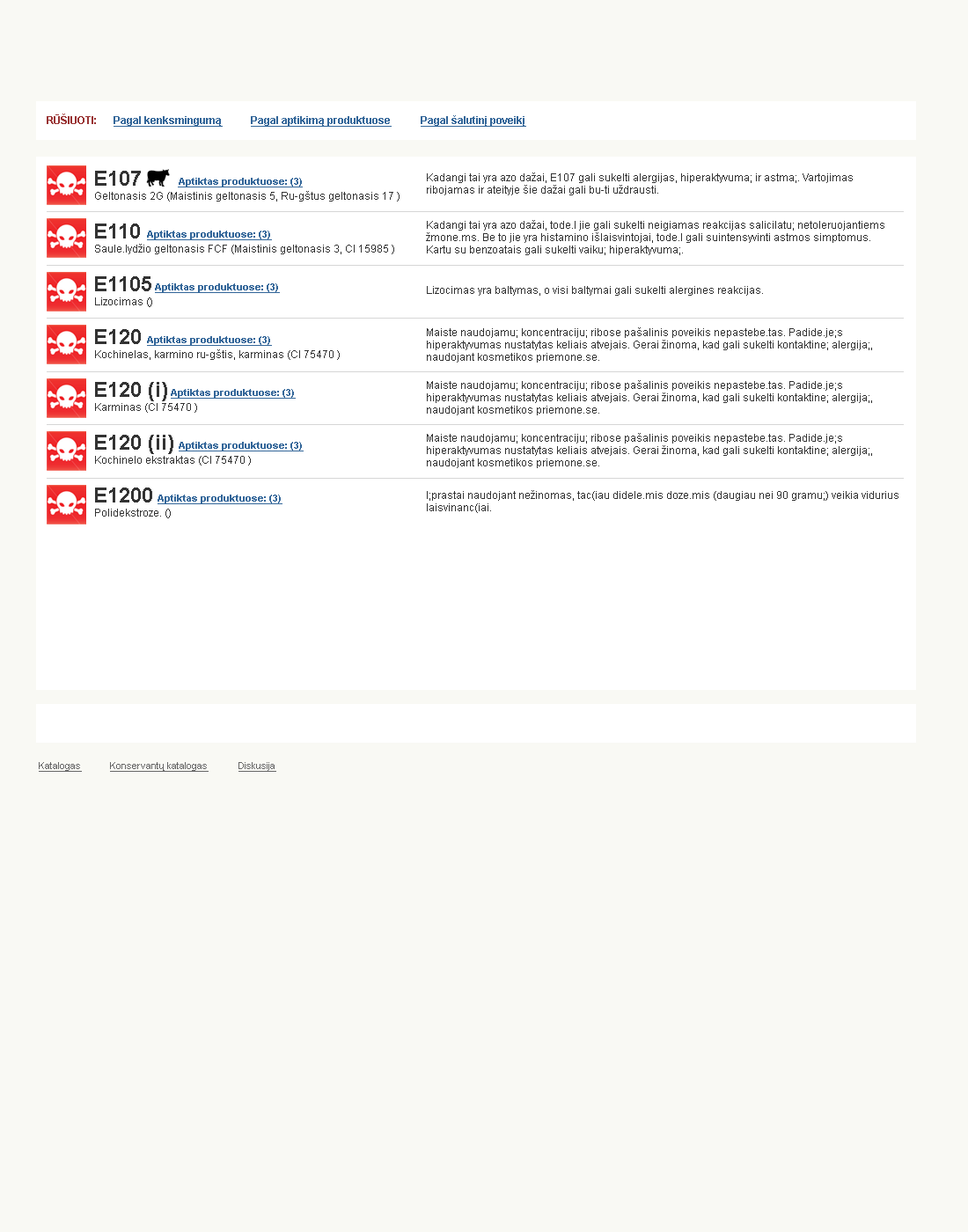
<style>
.page{position:relative;width:968px;height:1232px;background:#f9f9f4}
.page>*{position:absolute;margin:0}
.t1{font:10.6px "Arial-BoldMT";color:#993333}
.t2{font:10.6px "Arial-BoldMT";color:#336699;text-decoration:underline}
.t3{font:21.1px/52.8px "Arial-BoldMT";color:#333333}
.t4{font:10.6px/12.3px "ArialMT";color:#333333}
.t5{font:9.7px/52.8px "Arial-BoldMT";color:#336699;text-decoration:underline}
.t6{font:9.7px/52.8px "Arial-BoldMT";color:#336699}
.t7{font:10.6px/52.8px "ArialMT";color:#333333}
.t8{font:10.6px "ArialMT";color:#333333}
.t9{font:9.7px "ArialMT";color:#666666;text-decoration:underline}
</style>
<div class="page">
<p class="t1" style="left:47px;top:114px;width:49px;height:10px">RŪŠIUOTI:</p>
<p class="t2" style="left:114px;top:116px;width:109px;height:11px">Pagal kenksmingumą</p>
<p class="t2" style="left:251px;top:116px;width:141px;height:11px">Pagal aptikimą produktuose</p>
<p class="t2" style="left:421px;top:115px;width:105px;height:12px">Pagal šalutinį poveikį</p>
<p class="t3" style="left:95px;top:171px;width:78px;height:331px">E107<br>E110<br>E1105<br>E120<br>E120 (i)<br>E120 (ii)<br>E1200</p>
<p class="t4" style="left:427px;top:172px;width:426px;height:23px">Kadangi tai yra azo dažai, E107 gali sukelti alergijas, hiperaktyvuma; ir astma;. Vartojimas <br>ribojamas ir ateityje šie dažai gali bu-ti uždrausti.</p>
<p class="t5" style="left:147px;top:178px;width:157px;height:326px"><span class="t6">            </span>Aptiktas produktuose: (3)<br>Aptiktas produktuose: (3)<br>   Aptiktas produktuose: (3)<br>Aptiktas produktuose: (3)<br>         Aptiktas produktuose: (3)<br>            Aptiktas produktuose: (3)<br>    Aptiktas produktuose: (3)</p>
<p class="t7" style="left:95px;top:191px;width:304px;height:327px">Geltonasis 2G (Maistinis geltonasis 5, Ru-gštus geltonasis 17 )  <br>Saule.lydžio geltonasis FCF (Maistinis geltonasis 3, CI 15985 ) <br>Lizocimas () <br>Kochinelas, karmino ru-gštis, karminas (CI 75470 ) <br>Karminas (CI 75470 ) <br>Kochinelo ekstraktas (CI 75470 ) <br>Polidekstroze. ()</p>
<p class="t4" style="left:426px;top:220px;width:458px;height:35px">Kadangi tai yra azo dažai, tode.l jie gali sukelti neigiamas reakcijas salicilatu; netoleruojantiems <br>žmone.ms. Be to jie yra histamino išlaisvintojai, tode.l gali suintensyvinti astmos simptomus. <br>Kartu su benzoatais gali sukelti vaiku; hiperaktyvuma;.</p>
<p class="t8" style="left:427px;top:286px;width:336px;height:10px">Lizocimas yra baltymas, o visi baltymai gali sukelti alergines reakcijas.</p>
<p class="t4" style="left:427px;top:327px;width:445px;height:36px">Maiste naudojamu; koncentraciju; ribose pašalinis poveikis nepastebe.tas. Padide.je;s <br>hiperaktyvumas nustatytas keliais atvejais. Gerai žinoma, kad gali sukelti kontaktine; alergija;, <br>naudojant kosmetikos priemone.se.</p>
<p class="t4" style="left:427px;top:380px;width:445px;height:35px">Maiste naudojamu; koncentraciju; ribose pašalinis poveikis nepastebe.tas. Padide.je;s <br>hiperaktyvumas nustatytas keliais atvejais. Gerai žinoma, kad gali sukelti kontaktine; alergija;, <br>naudojant kosmetikos priemone.se.</p>
<p class="t4" style="left:427px;top:433px;width:445px;height:35px">Maiste naudojamu; koncentraciju; ribose pašalinis poveikis nepastebe.tas. Padide.je;s <br>hiperaktyvumas nustatytas keliais atvejais. Gerai žinoma, kad gali sukelti kontaktine; alergija;, <br>naudojant kosmetikos priemone.se.</p>
<p class="t4" style="left:427px;top:490px;width:471px;height:23px">I;prastai naudojant nežinomas, tac(iau didele.mis doze.mis (daugiau nei 90 gramu;) veikia vidurius <br>laisvinanc(iai.</p>
<p class="t9" style="left:39px;top:762px;width:43px;height:10px">Katalogas</p>
<p class="t9" style="left:110px;top:762px;width:99px;height:10px">Konservantų katalogas</p>
<p class="t9" style="left:238px;top:762px;width:38px;height:10px">Diskusija</p>
</div>
